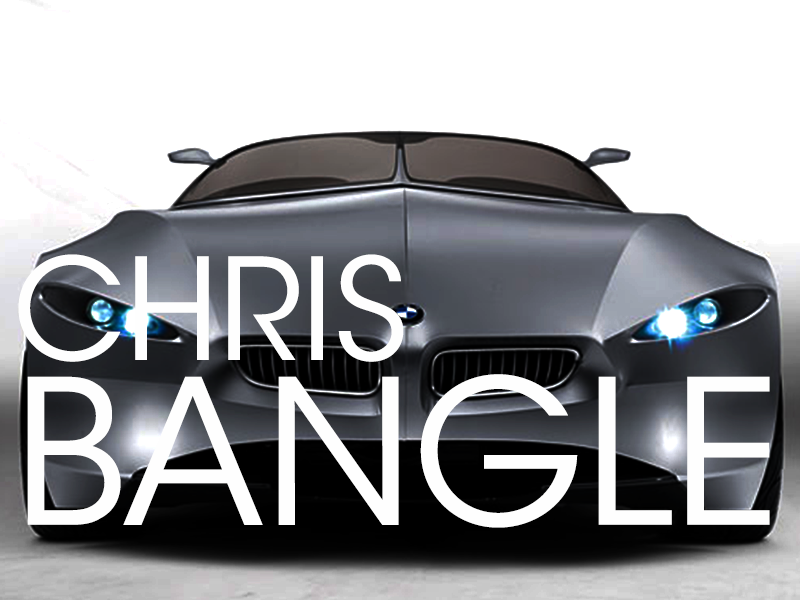
<style>
.page{position:relative;width:800px;height:600px;background:#ffffff}
.page>*{position:absolute;margin:0}
.t1{font:200px/165px "ITCAvantGardeStd-Bk";color:#fefefe}
.t2{font:140px/165px "ITCAvantGardeStd-Bk";color:#fefefe}
</style>
<div class="page">
<p class="t1" style="left:18px;top:254px;width:752px;height:274px"><span class="t2">CHRIS<br></span>BANGLE</p>
</div>
